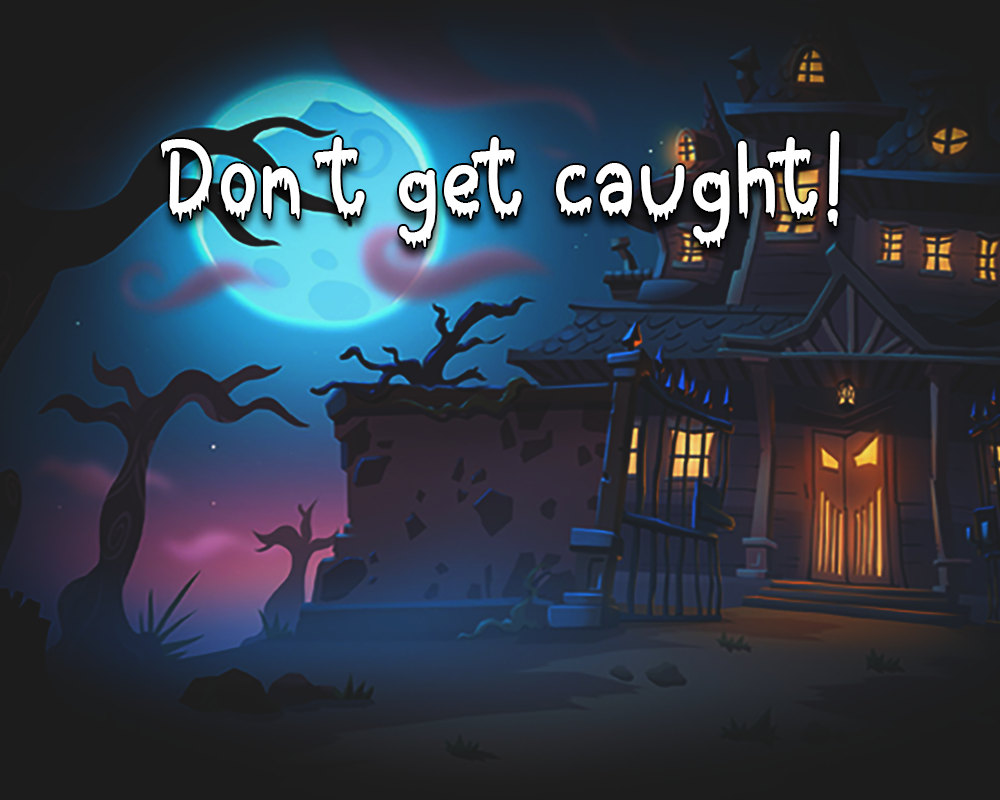
<style>
.page{position:relative;width:1000px;height:800px}
.page>*{position:absolute;margin:0}
.t1{font:70.6px "BatBoo";letter-spacing:0.02em;color:#ffffff}
</style>
<div class="page">
<p class="t1" style="left:161px;top:131px;width:679px;height:117px">Don’t get caught!</p>
</div>
